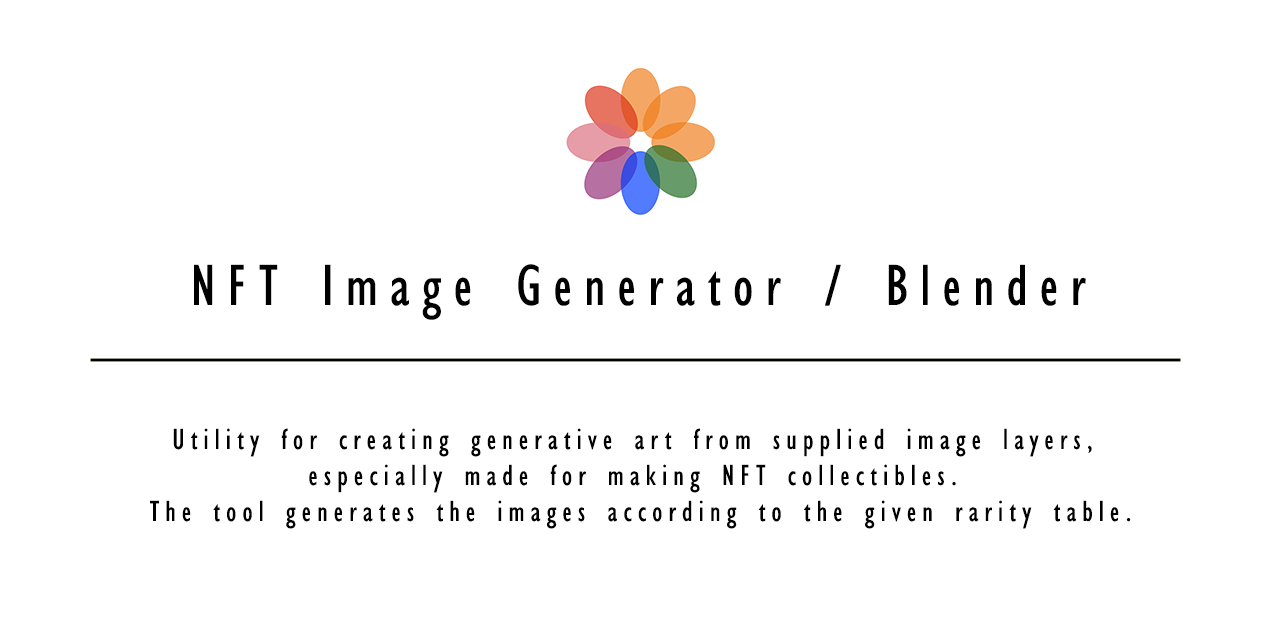
<style>
.page{position:relative;width:1280px;height:640px;background:#ffffff}
.page>*{position:absolute;margin:0}
.t1{font:60px "GillSansMT-Condensed";letter-spacing:0.2em;color:#000000}
.t2{font:30px "GillSansMT-Condensed";letter-spacing:0.2em;color:#000000}
</style>
<div class="page">
<p class="t1" style="left:194px;top:264px;width:892px;height:56px">NFT Image Generator / Blender</p>
<p class="t2" style="left:150px;top:428px;width:981px;height:101px;text-align:center">Utility for creating generative art from supplied image layers, <br>especially made for making NFT collectibles. <br>The tool generates the images according to the given rarity table.</p>
</div>
